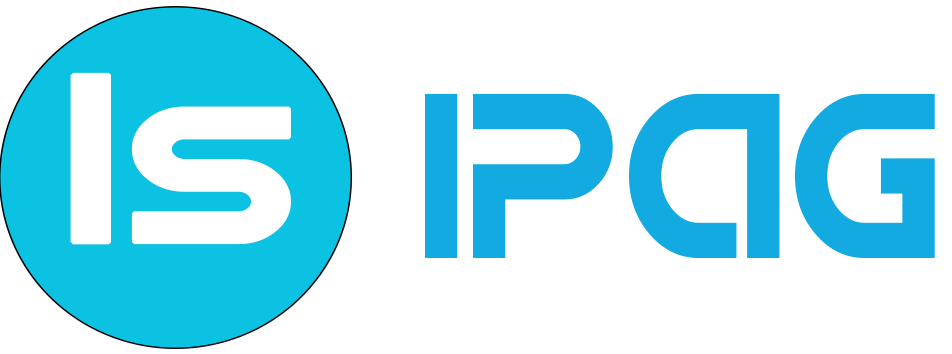
<style>
.page{position:relative;width:952px;height:354px;background:#ffffff}
.page>*{position:absolute;margin:0}
.t1{font:243.8px "IDroid";color:#ffffff;font-variant:small-caps;font-weight:bold}
.t2{font:195px "IDroid";color:#ffffff;font-variant:small-caps;font-weight:bold;scale:1.25 1}
.t3{font:240.4px "IDroid";color:#13a9e1;scale:0.92 1}
</style>
<div class="page">
<p class="t1" style="left:70px;top:72px;width:221px;height:173px">I<span class="t2">S</span></p>
<p class="t3" style="left:425px;top:93px;width:510px;height:165px">IpAG</p>
</div>
